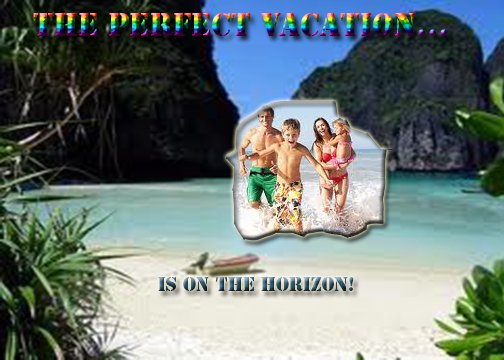
<style>
.page{position:relative;width:504px;height:360px}
.page>*{position:absolute;margin:0}
.t1{font:30px "StencilStd"}
.t2{font:18px "StencilStd"}
</style>
<div class="page">
<p class="t1" style="left:33px;top:13px;width:414px;height:23px">The perfect vacation...</p>
<p class="t2" style="left:158px;top:277px;width:196px;height:14px">is on the horizon!</p>
</div>
